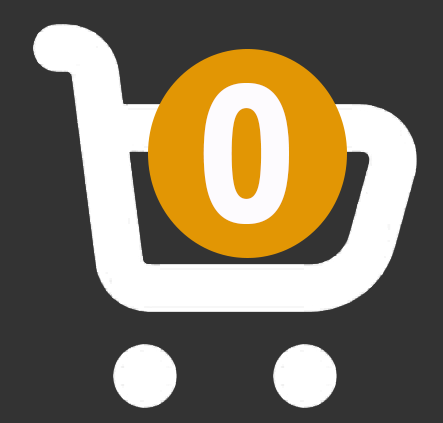
<style>
.page{position:relative;width:443px;height:423px;background:#333333}
.page>*{position:absolute;margin:0}
.t1{font:186.4px "Tahoma-Bold";color:#fdfbfe;scale:0.82 1}
</style>
<div class="page">
<p class="t1" style="left:203px;top:83px;width:86px;height:141px">0</p>
</div>
